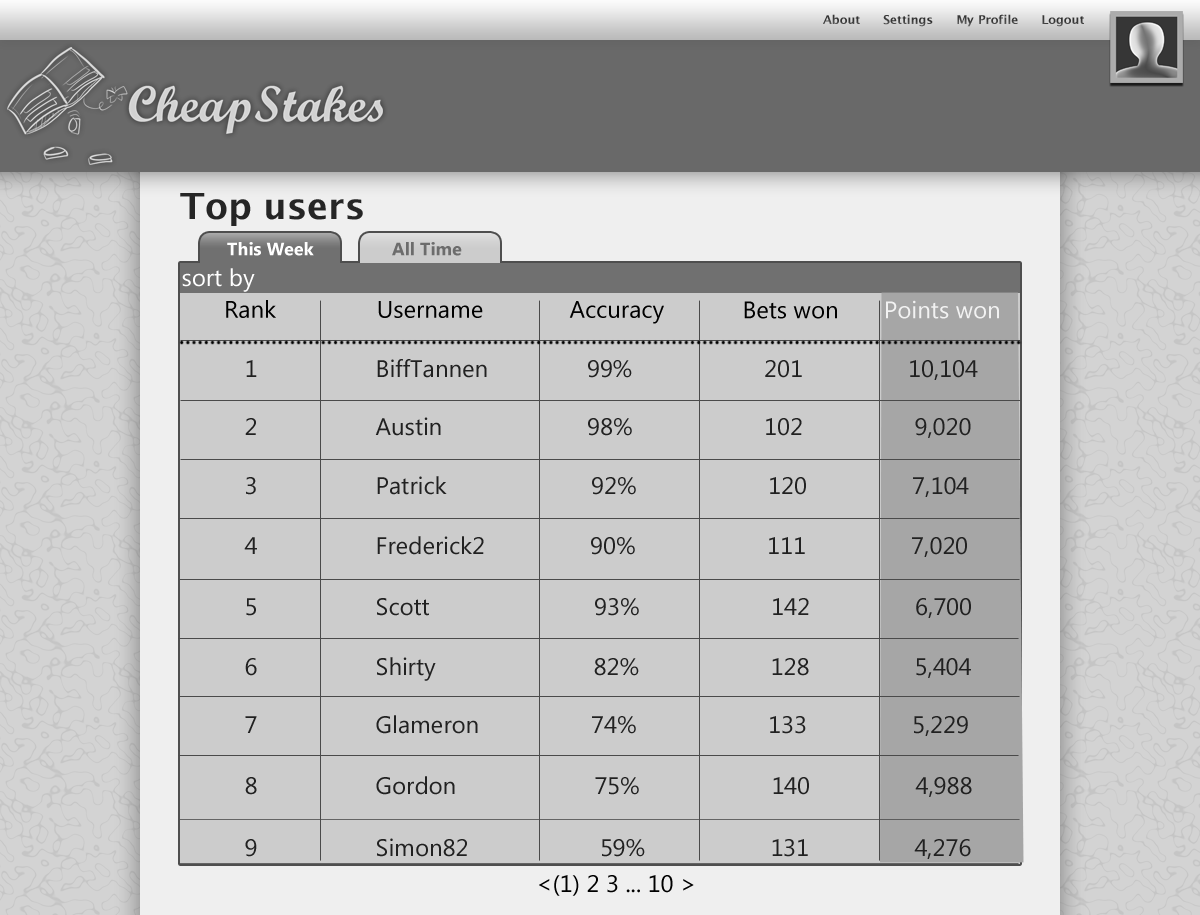
<style>
.page{position:relative;width:1200px;height:915px;background:#cccccc}
.page>*{position:absolute;margin:0}
.t1{font:12px "LucidaSans-Demi";color:#3c3c3c}
.t2{font:36px "LucidaSans-Demi";color:#252525}
.t3{font:18px "SegoeUI-Bold";color:#ffffff}
.t4{font:18px "SegoeUI-Bold";color:#6c6c6c}
.t5{font:24px "SegoeUI";color:#ffffff}
.t6{font:24px "SegoeUI";color:#000000}
.t7{font:24px "SegoeUI";color:#f2f2f2}
.t8{font:24px "SegoeUI";color:#212121}
</style>
<div class="page">
<p class="t1" style="left:823px;top:14px;width:261px;height:13px">About      Settings      My Profile      Logout</p>
<p class="t2" style="left:180px;top:193px;width:183px;height:33px">Top users</p>
<p class="t3" style="left:227px;top:242px;width:87px;height:14px">This Week</p>
<p class="t4" style="left:392px;top:242px;width:70px;height:14px">All Time</p>
<p class="t5" style="left:182px;top:268px;width:73px;height:24px">sort by</p>
<p class="t6" style="left:226px;top:300px;width:50px;height:18px">Rank</p>
<p class="t6" style="left:378px;top:301px;width:105px;height:17px">Username</p>
<p class="t6" style="left:569px;top:301px;width:95px;height:23px">Accuracy</p>
<p class="t6" style="left:744px;top:301px;width:93px;height:18px">Bets won</p>
<p class="t7" style="left:886px;top:300px;width:113px;height:19px">Points won</p>
<p class="t8" style="left:246px;top:359px;width:732px;height:21px">1                  BiffTannen               99%                    201                10,104</p>
<p class="t8" style="left:245px;top:417px;width:726px;height:21px">2                  Austin                      98%                    102                 9,020</p>
<p class="t8" style="left:246px;top:476px;width:723px;height:21px">3                  Patrick                      92%                    120                7,104</p>
<p class="t8" style="left:244px;top:536px;width:723px;height:21px">4                  Frederick2                90%                    111                7,020</p>
<p class="t8" style="left:246px;top:598px;width:725px;height:20px">5                  Scott                         93%                    142                6,700</p>
<p class="t8" style="left:245px;top:657px;width:726px;height:24px">6                  Shirty                        82%                    128                5,404</p>
<p class="t8" style="left:245px;top:715px;width:723px;height:21px">7                  Glameron                 74%                    133                5,229</p>
<p class="t8" style="left:245px;top:776px;width:727px;height:21px">8                  Gordon                     75%                    140                4,988</p>
<p class="t8" style="left:245px;top:838px;width:726px;height:21px">9                  Simon82                    59%                   131                4,276</p>
<p class="t6" style="left:539px;top:875px;width:155px;height:21px">&lt;(1) 2 3 ... 10 &gt;</p>
</div>
